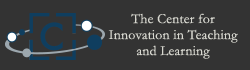
<style>
.page{position:relative;width:250px;height:70px;background:#333333}
.page>*{position:absolute;margin:0}
.t1{font:14px/16px "Garamond";letter-spacing:0.01em;color:#d8d8d0}
</style>
<div class="page">
<p class="t1" style="left:108px;top:13px;width:130px;height:46px;text-align:center">The Center for<br>Innovation in Teaching<br>and Learning</p>
</div>
